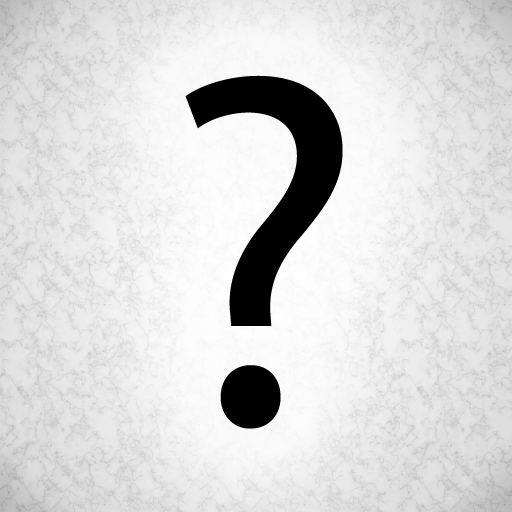
<style>
.page{position:relative;width:512px;height:512px}
.page>*{position:absolute;margin:0}
.t1{font:505.8px "MyriadPro-Regular";color:#000000}
</style>
<div class="page">
<p class="t1" style="left:185px;top:75px;width:158px;height:354px">?</p>
</div>
